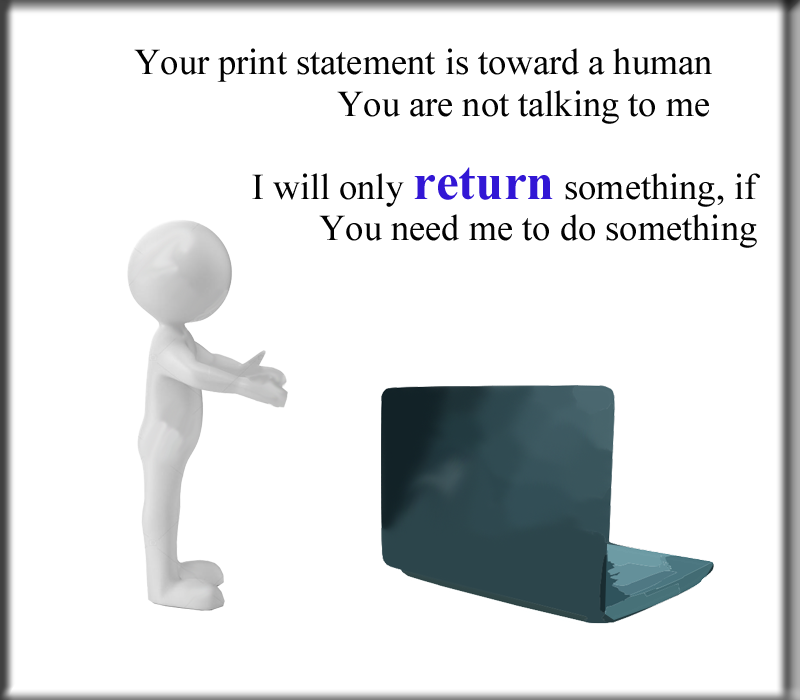
<style>
.page{position:relative;width:800px;height:700px;background:#ffffff}
.page>*{position:absolute;margin:0}
.t1{font:36.4px "TimesNewRomanPSMT";color:#020202}
.t2{font:51.1px "TimesNewRomanPS-BoldMT";color:#3217d5}
</style>
<div class="page">
<p class="t1" style="left:134px;top:48px;width:578px;height:34px">Your print statement is toward a human</p>
<p class="t1" style="left:337px;top:90px;width:372px;height:34px">You are not talking to me</p>
<p class="t1" style="left:252px;top:167px;width:508px;height:40px">I will only <span class="t2">return</span> something, if</p>
<p class="t1" style="left:319px;top:214px;width:438px;height:34px">You need me to do something</p>
</div>
